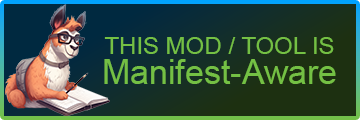
<style>
.page{position:relative;width:360px;height:120px}
.page>*{position:absolute;margin:0}
.t1{font:24px/30px "ArialMT";color:#74c044}
.t2{font:34px/30px "ArialMT";color:#74c044}
</style>
<div class="page">
<p class="t1" style="left:104px;top:37px;width:232px;height:47px;text-align:center">THIS MOD / TOOL IS<br><span class="t2">Manifest-Aware</span></p>
</div>
